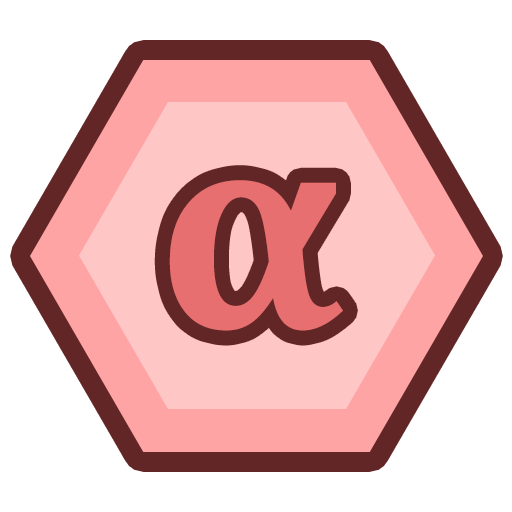
<style>
.page{position:relative;width:512px;height:512px;background:#ffffff}
.page>*{position:absolute;margin:0}
.t1{font:300px "Cambria-Bold";color:#e76f6f}
</style>
<div class="page">
<p class="t1" style="left:169px;top:180px;width:174px;height:151px">α</p>
</div>
